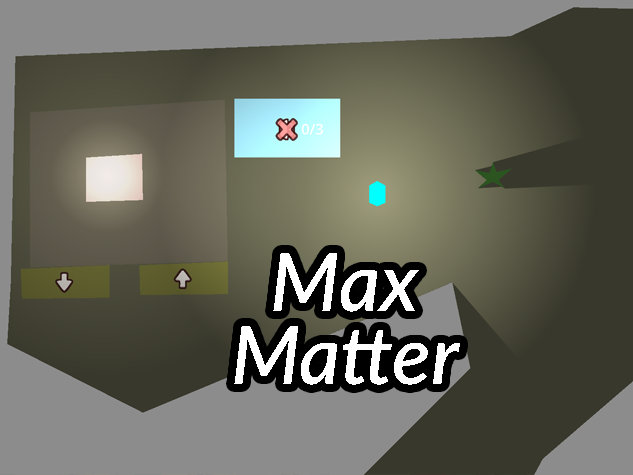
<style>
.page{position:relative;width:633px;height:475px;background:#8c8c8c}
.page>*{position:absolute;margin:0}
.t1{font:80px/73px "Lato-SemiboldItalic";color:#ffffff}
.t2{font:80px "Antiquity-print";color:#ffffff}
</style>
<div class="page">
<p class="t1" style="left:234px;top:253px;width:226px;height:132px;text-align:center"><span class="t2"><br></span>Max <br>Matter</p>
</div>
